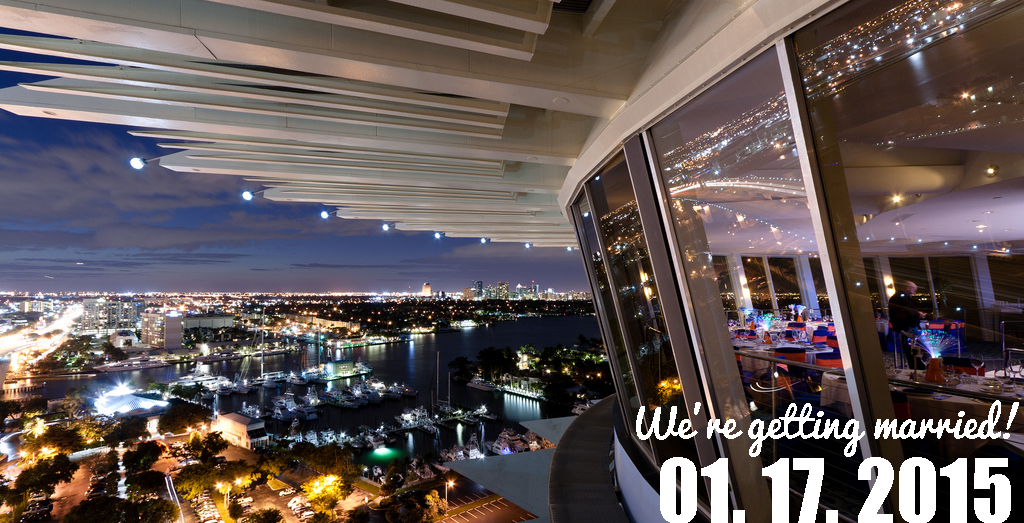
<style>
.page{position:relative;width:1024px;height:523px}
.page>*{position:absolute;margin:0}
.t1{font:40.9px "Pacifico";color:#ffffff}
.t2{font:82px "Impact";color:#ffffff}
</style>
<div class="page">
<p class="t1" style="left:636px;top:400px;width:383px;height:57px">We’re getting married!</p>
<p class="t2" style="left:660px;top:457px;width:351px;height:67px">01. 17. 2015</p>
</div>
